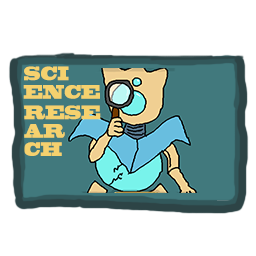
<style>
.page{position:relative;width:256px;height:256px;background:#ffffff}
.page>*{position:absolute;margin:0}
.t1{font:18.4px/18.4px "BlackoakStd";color:#f5d16e;scale:0.58 1}
</style>
<div class="page">
<p class="t1" style="left:23px;top:66px;width:77px;height:33px">SCI<br>ENCE</p>
<p class="t1" style="left:23px;top:105px;width:78px;height:51px">RESE<br>AR<br>CH</p>
</div>
